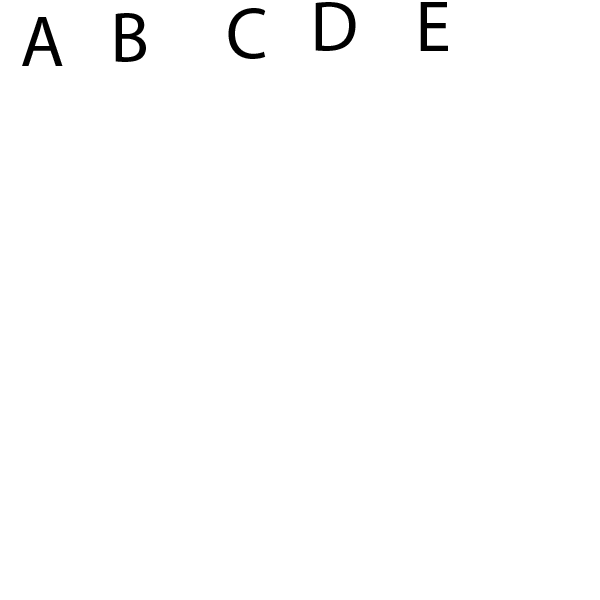
<style>
.page{position:relative;width:600px;height:600px;background:#ffffff}
.page>*{position:absolute;margin:0}
.t1{font:72px "MyriadPro-Regular";color:#000000}
</style>
<div class="page">
<p class="t1" style="left:315px;top:2px;width:41px;height:49px">D</p>
<p class="t1" style="left:420px;top:2px;width:28px;height:49px">E</p>
<p class="t1" style="left:22px;top:17px;width:41px;height:49px">A</p>
<p class="t1" style="left:115px;top:13px;width:31px;height:49px">B</p>
<p class="t1" style="left:228px;top:8px;width:38px;height:51px">C</p>
</div>
